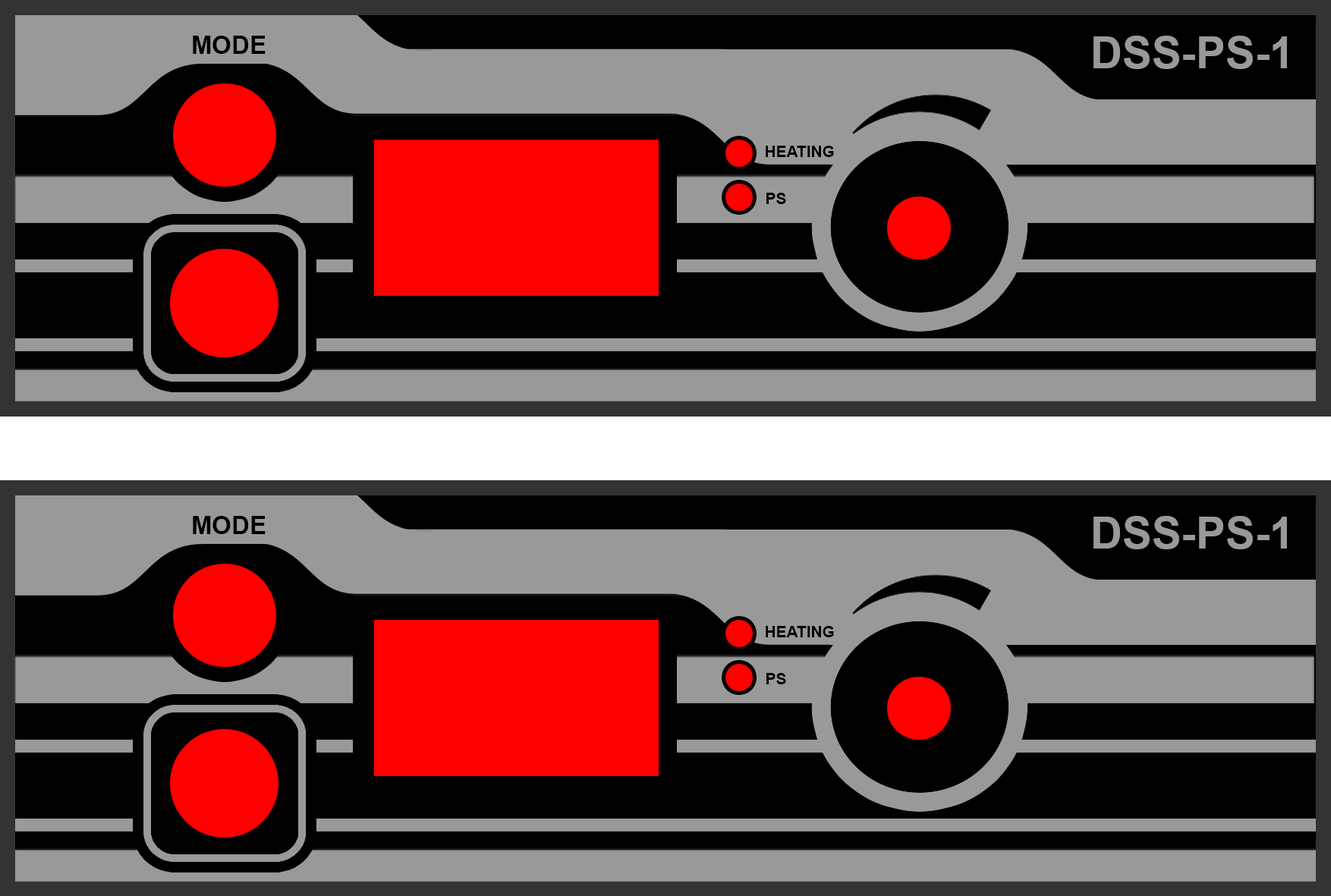
<style>
.page{position:relative;width:1331px;height:896px;background:#000000}
.page>*{position:absolute;margin:0}
.t1{font:25.3px "Arial-BoldMT";color:#000000}
.t2{font:44.3px "Arial-BoldMT";color:#999999}
.t3{font:15.8px "Arial-BoldMT";color:#000000}
</style>
<div class="page">
<p class="t1" style="left:193px;top:36px;width:73px;height:18px">MODE</p>
<p class="t2" style="left:1093px;top:36px;width:194px;height:33px">DSS-PS-1</p>
<p class="t3" style="left:766px;top:146px;width:68px;height:11px">HEATING</p>
<p class="t3" style="left:766px;top:193px;width:20px;height:11px">PS</p>
<p class="t1" style="left:193px;top:516px;width:73px;height:18px">MODE</p>
<p class="t2" style="left:1093px;top:516px;width:194px;height:33px">DSS-PS-1</p>
<p class="t3" style="left:766px;top:626px;width:68px;height:11px">HEATING</p>
<p class="t3" style="left:766px;top:673px;width:20px;height:11px">PS</p>
</div>
